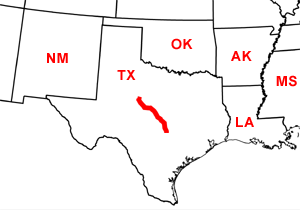
<style>
.page{position:relative;width:300px;height:210px;background:#ffffff}
.page>*{position:absolute;margin:0}
.t1{font:14px "Arial-BoldMT";letter-spacing:0.05em;color:#ff0000}
</style>
<div class="page">
<p class="t1" style="left:171px;top:38px;width:22px;height:12px">OK</p>
<p class="t1" style="left:47px;top:53px;width:21px;height:10px">NM</p>
<p class="t1" style="left:231px;top:51px;width:21px;height:10px">AK</p>
<p class="t1" style="left:117px;top:70px;width:19px;height:10px">TX</p>
<p class="t1" style="left:276px;top:75px;width:21px;height:12px">MS</p>
<p class="t1" style="left:236px;top:117px;width:18px;height:10px">LA</p>
</div>
